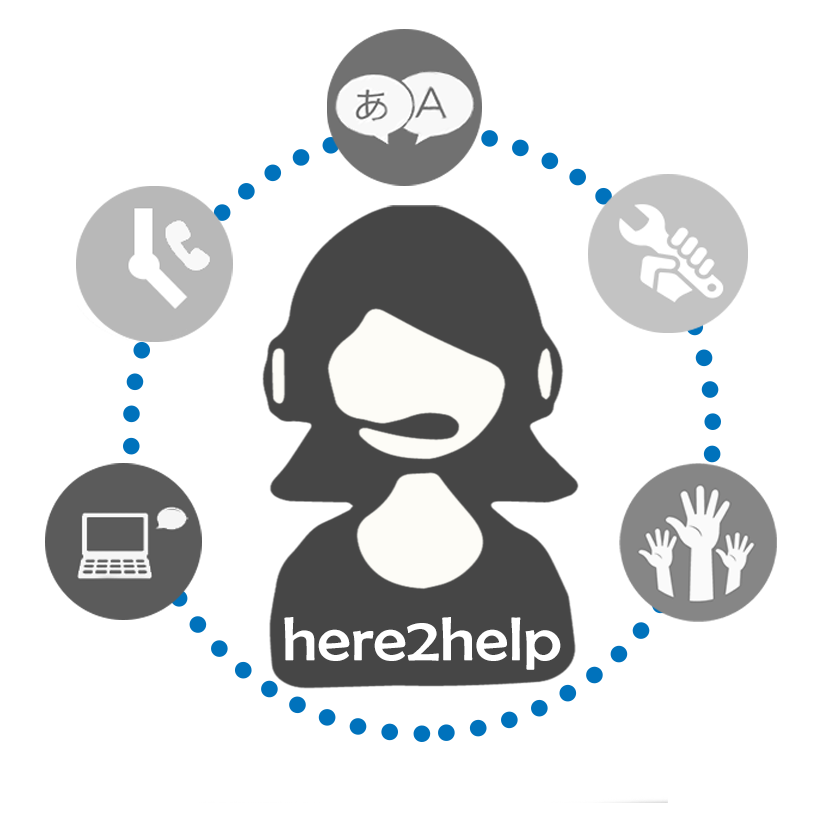
<style>
.page{position:relative;width:833px;height:833px;background:#ffffff}
.page>*{position:absolute;margin:0}
.t1{font:62.2px "BerlinSansFB-Reg";color:#ffffff;scale:1.1 1}
</style>
<div class="page">
<p class="t1" style="left:284px;top:617px;width:277px;height:53px">here2help</p>
</div>
